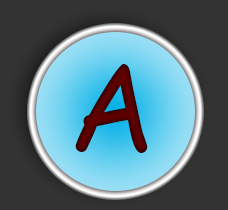
<style>
.page{position:relative;width:228px;height:210px;background:#333333}
.page>*{position:absolute;margin:0}
.t1{font:120px "ComicSansMS";color:#540000}
</style>
<div class="page">
<p class="t1" style="left:75px;top:64px;width:73px;height:89px">A</p>
</div>
